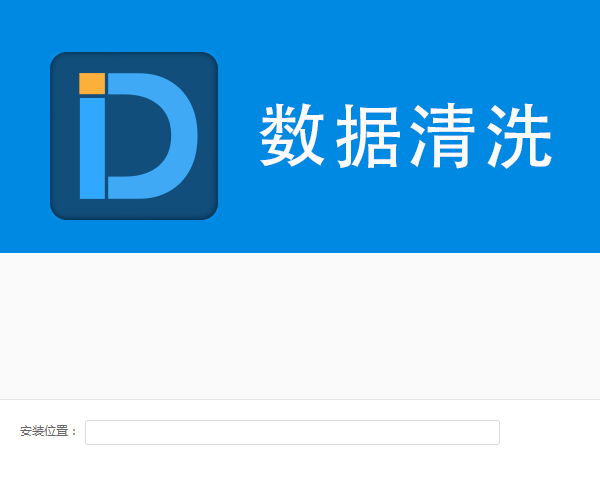
<style>
.page{position:relative;width:600px;height:503px;background:#0089e2}
.page>*{position:absolute;margin:0}
.t1{font:72px "AdobeHeitiStd-Regular";letter-spacing:0.052em;color:#fafafa}
</style>
<div class="page">
<p class="t1" style="left:259px;top:102px;width:293px;height:67px">数据清洗</p>
</div>
